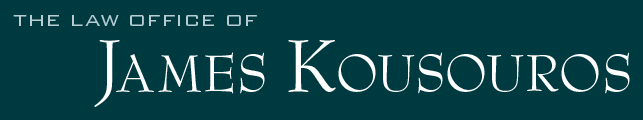
<style>
.page{position:relative;width:643px;height:120px;background:#003a41}
.page>*{position:absolute;margin:0}
.t1{font:22px "BankGothicBT-Light";letter-spacing:0.008em;color:#b8ccd4;text-transform:uppercase}
.t2{font:22px "BankGothicBT-Light";letter-spacing:0.025em;color:#b8ccd4;text-transform:uppercase}
.t3{font:22px "BankGothicBT-Light";letter-spacing:-0.025em;color:#b8ccd4;text-transform:uppercase}
.t4{font:22px "BankGothicBT-Light";letter-spacing:0.075em;color:#b8ccd4;text-transform:uppercase}
.t5{font:22px "BankGothicBT-Light";letter-spacing:-0.01em;color:#b8ccd4;text-transform:uppercase}
.t6{font:72px "BernhardModernBT-Roman";letter-spacing:-0.025em;color:#ffffff;font-variant:small-caps}
.t7{font:72px "BernhardModernBT-Roman";letter-spacing:-0.05em;color:#ffffff;font-variant:small-caps}
.t8{font:72px "BernhardModernBT-Roman";letter-spacing:0.1em;color:#ffffff;font-variant:small-caps}
.t9{font:72px "BernhardModernBT-Roman";color:#ffffff;font-variant:small-caps}
.t10{font:72px "BernhardModernBT-Roman";letter-spacing:0.005em;color:#ffffff;font-variant:small-caps}
.t11{font:72px "BernhardModernBT-Roman";letter-spacing:-0.03em;color:#ffffff;font-variant:small-caps}
.t12{font:72px "BernhardModernBT-Roman";letter-spacing:-0.01em;color:#ffffff;font-variant:small-caps}
.t13{font:72px "BernhardModernBT-Roman";letter-spacing:0.01em;color:#ffffff;font-variant:small-caps}
</style>
<div class="page">
<p class="t1" style="left:13px;top:15px;width:244px;height:11px"><span class="t2">t</span><span class="t3">he </span><span class="t4">l</span><span class="t5">aw</span> offi<span class="t2">ce</span> of</p>
<p class="t6" style="left:94px;top:40px;width:536px;height:67px"><span class="t7">J</span><span class="t8">a</span><span class="t9">m</span>es <span class="t10">K</span><span class="t11">o</span><span class="t7">u</span><span class="t11">so</span><span class="t12">u</span><span class="t13">ro</span><span class="t11">s</span></p>
</div>
